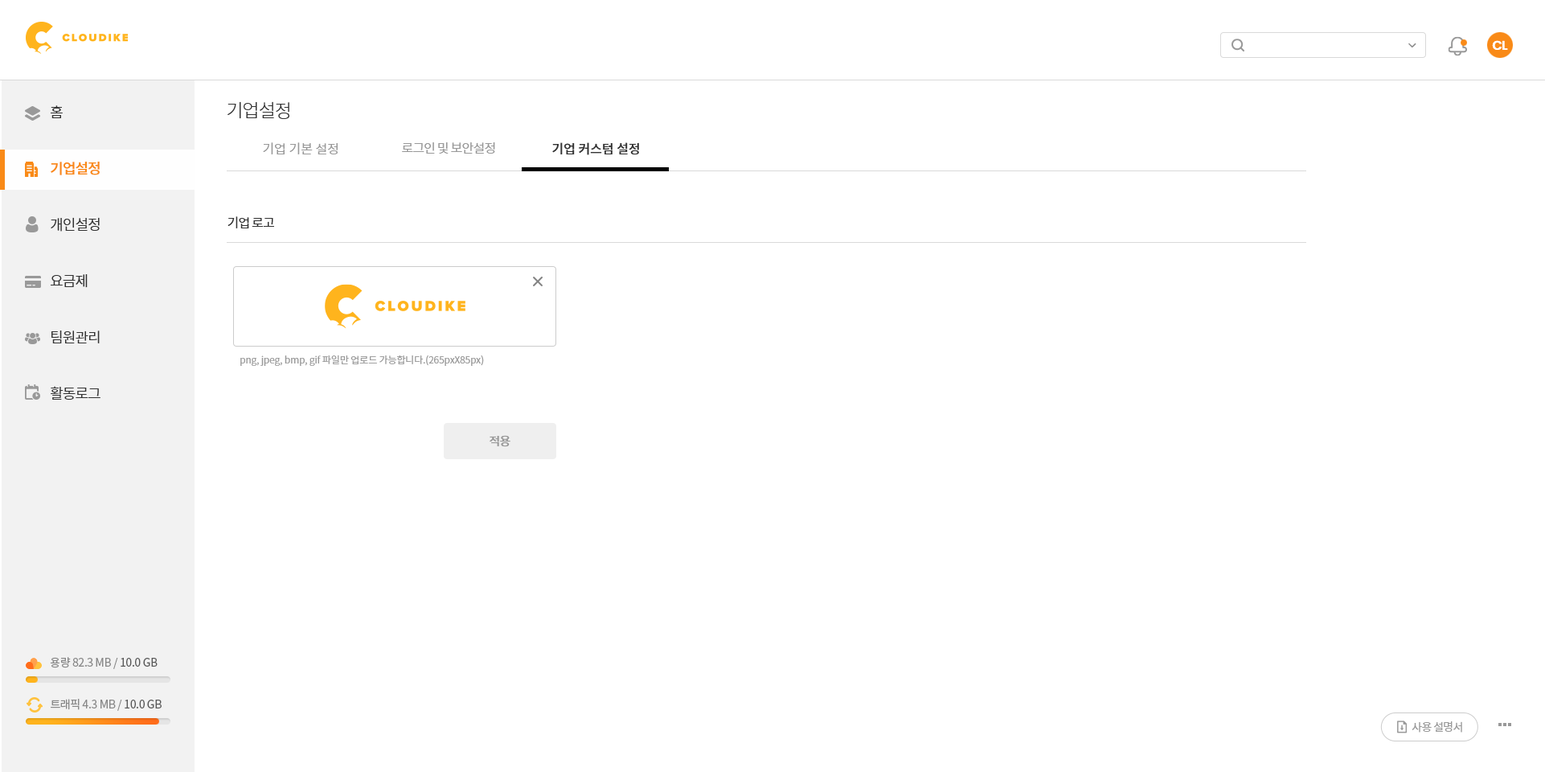
<style>
.page{position:relative;width:1545px;height:772px;background:#ffffff}
.page>*{position:absolute;margin:0}
.t1{font:12.9px "Poppins-SemiBold";letter-spacing:-0.05em;color:#ffffff}
.t2{font:18.5px "NotoSansCJKkr-Light";letter-spacing:-0.05em;color:#333333}
.t3{font:14.5px/56.3px "NotoSansCJKkr-DemiLight";letter-spacing:-0.05em;color:#333333}
.t4{font:14.5px/56.3px "NotoSansCJKkr-Medium";letter-spacing:-0.05em;color:#f98a17}
.t5{font:12.9px "NotoSansCJKkr-DemiLight";color:#999999}
.t6{font:12.9px "NotoSansCJKkr-DemiLight";letter-spacing:-0.05em;color:#999999}
.t7{font:12.9px "NotoSansCJKkr-Medium";color:#333333}
.t8{font:12.9px "NotoSansCJKkr-Regular";letter-spacing:-0.05em;color:#333333}
.t9{font:9.6px "NotoSansCJKkr-DemiLight";letter-spacing:-0.01em;color:#999999}
.t10{font:12.1px "NotoSansCJKkr-Medium";letter-spacing:-0.05em;color:#999999}
.t11{font:11.3px "NotoSansCJKkr-Regular";letter-spacing:-0.025em;color:#888888}
.t12{font:11.3px "NotoSansCJKkr-Regular";letter-spacing:-0.025em;color:#585858}
.t13{font:11.3px "NotoSansCJKkr-Regular";letter-spacing:-0.05em;color:#999999}
</style>
<div class="page">
<p class="t1" style="left:1492px;top:40px;width:16px;height:10px">CL</p>
<p class="t2" style="left:228px;top:101px;width:61px;height:18px">기업설정</p>
<p class="t3" style="left:51px;top:105px;width:49px;height:295px">홈<br><span class="t4">기업설정<br></span>개인설정<br>요금제<br>팀원관리<br>활동로그</p>
<p class="t5" style="left:263px;top:142px;width:75px;height:12px">기업 기본 설정</p>
<p class="t6" style="left:402px;top:142px;width:93px;height:12px">로그인 및 보안설정</p>
<p class="t7" style="left:552px;top:142px;width:87px;height:13px">기업 커스텀 설정</p>
<p class="t8" style="left:228px;top:216px;width:46px;height:12px">기업 로고</p>
<p class="t9" style="left:240px;top:355px;width:244px;height:11px">png, jpeg, bmp, gif 파일만 업로드 가능합니다.(265pxX85px)</p>
<p class="t10" style="left:490px;top:435px;width:20px;height:12px">적용</p>
<p class="t11" style="left:50px;top:657px;width:108px;height:12px">용량 82.3 MB / <span class="t12">10.0 GB</span></p>
<p class="t11" style="left:51px;top:699px;width:111px;height:12px">트래픽 4.3 MB / <span class="t12">10.0 GB</span></p>
<p class="t13" style="left:1412px;top:721px;width:50px;height:11px">사용 설명서</p>
</div>
